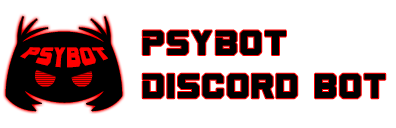
<style>
.page{position:relative;width:396px;height:128px;background:#ffffff}
.page>*{position:absolute;margin:0}
.t1{font:36px "Cyberfall";color:#000000}
</style>
<div class="page">
<p class="t1" style="left:142px;top:30px;width:244px;height:69px">PsyBot<br>Discord bot</p>
</div>
